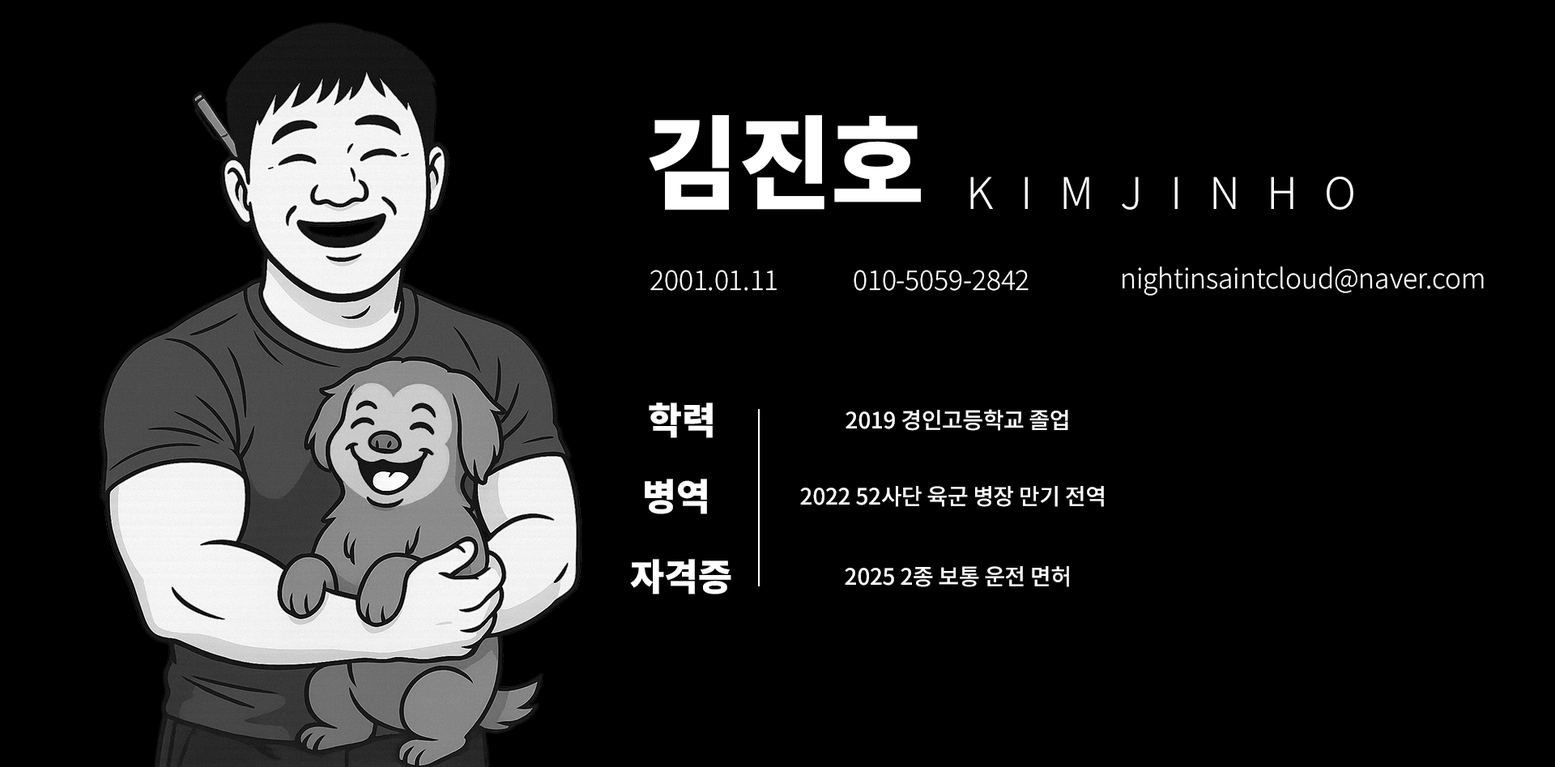
<style>
.page{position:relative;width:1555px;height:767px;background:#000000}
.page>*{position:absolute;margin:0}
.t1{font:101.5px "NotoSansKR-Black";letter-spacing:-0.005em;color:#ffffff}
.t2{font:43.5px "NotoSansKR-Light";letter-spacing:0.2em;color:#ffffff}
.t3{font:27.3px "NotoSansKR-Light";letter-spacing:-0.005em;color:#ffffff}
.t4{font:36.9px "NotoSansKR-Black";letter-spacing:-0.005em;color:#ffffff}
.t5{font:22.4px "NotoSansKR-Medium";letter-spacing:-0.005em;color:#ffffff}
</style>
<div class="page">
<p class="t1" style="left:649px;top:115px;width:272px;height:95px">김진호</p>
<p class="t2" style="left:970px;top:177px;width:383px;height:33px">K I M J I N H O</p>
<p class="t3" style="left:650px;top:270px;width:127px;height:21px">2001.01.11</p>
<p class="t3" style="left:854px;top:270px;width:174px;height:21px">010-5059-2842</p>
<p class="t3" style="left:1122px;top:266px;width:362px;height:30px">nightinsaintcloud@naver.com</p>
<p class="t4" style="left:649px;top:402px;width:64px;height:36px">학력</p>
<p class="t5" style="left:845px;top:409px;width:223px;height:22px">2019 경인고등학교 졸업</p>
<p class="t4" style="left:645px;top:479px;width:62px;height:35px">병역</p>
<p class="t5" style="left:800px;top:486px;width:304px;height:21px">2022 52사단 육군 병장 만기 전역</p>
<p class="t4" style="left:630px;top:559px;width:101px;height:35px">자격증</p>
<p class="t5" style="left:845px;top:566px;width:224px;height:21px">2025 2종 보통 운전 면허</p>
</div>
